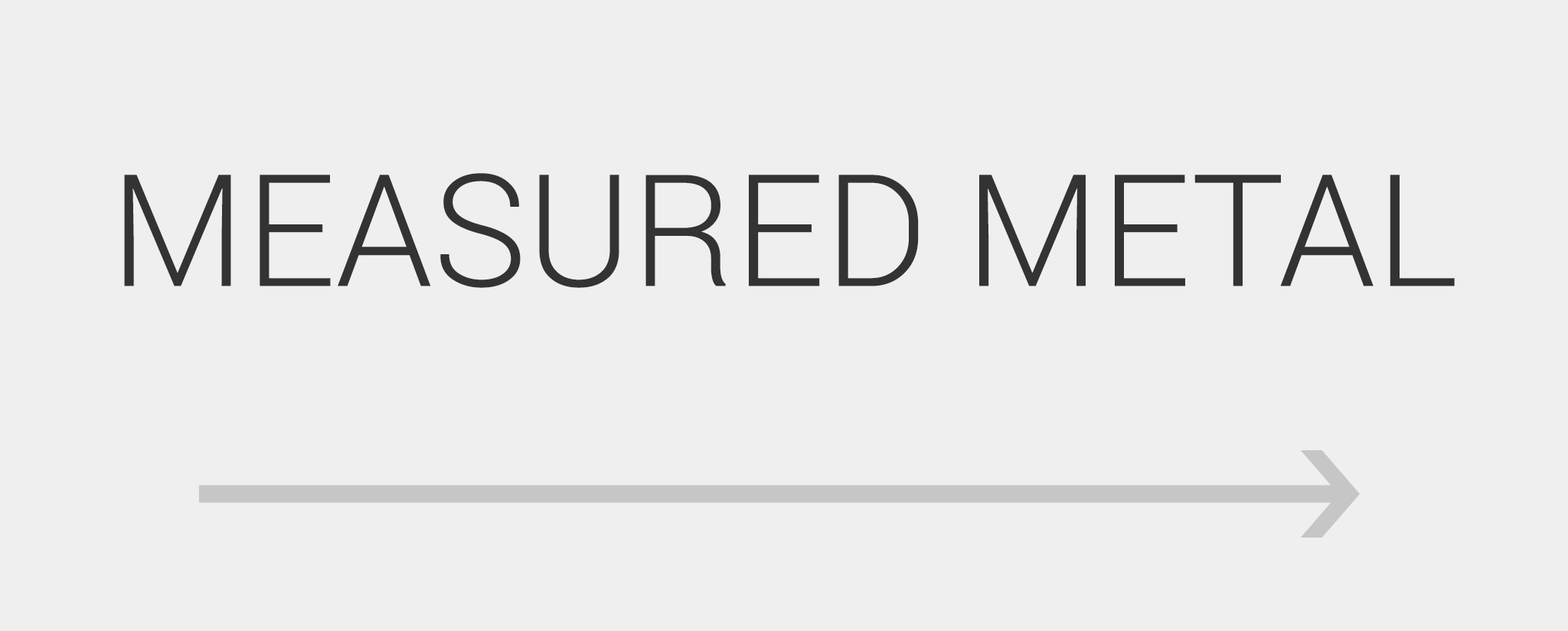
<style>
.page{position:relative;width:1568px;height:631px;background:#efefef}
.page>*{position:absolute;margin:0}
.t1{font:156.2px "Roboto-Light";color:#333333;text-transform:uppercase}
</style>
<div class="page">
<p class="t1" style="left:124px;top:173px;width:1331px;height:115px">MEASURED METAL</p>
</div>
